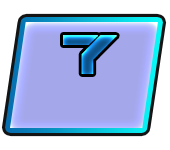
<style>
.page{position:relative;width:170px;height:150px;background:#a4a8eb}
.page>*{position:absolute;margin:0}
.t1{font:75px "TechnoHideo";font-weight:bold}
</style>
<div class="page">
<p class="t1" style="left:63px;top:35px;width:54px;height:39px">7</p>
</div>
